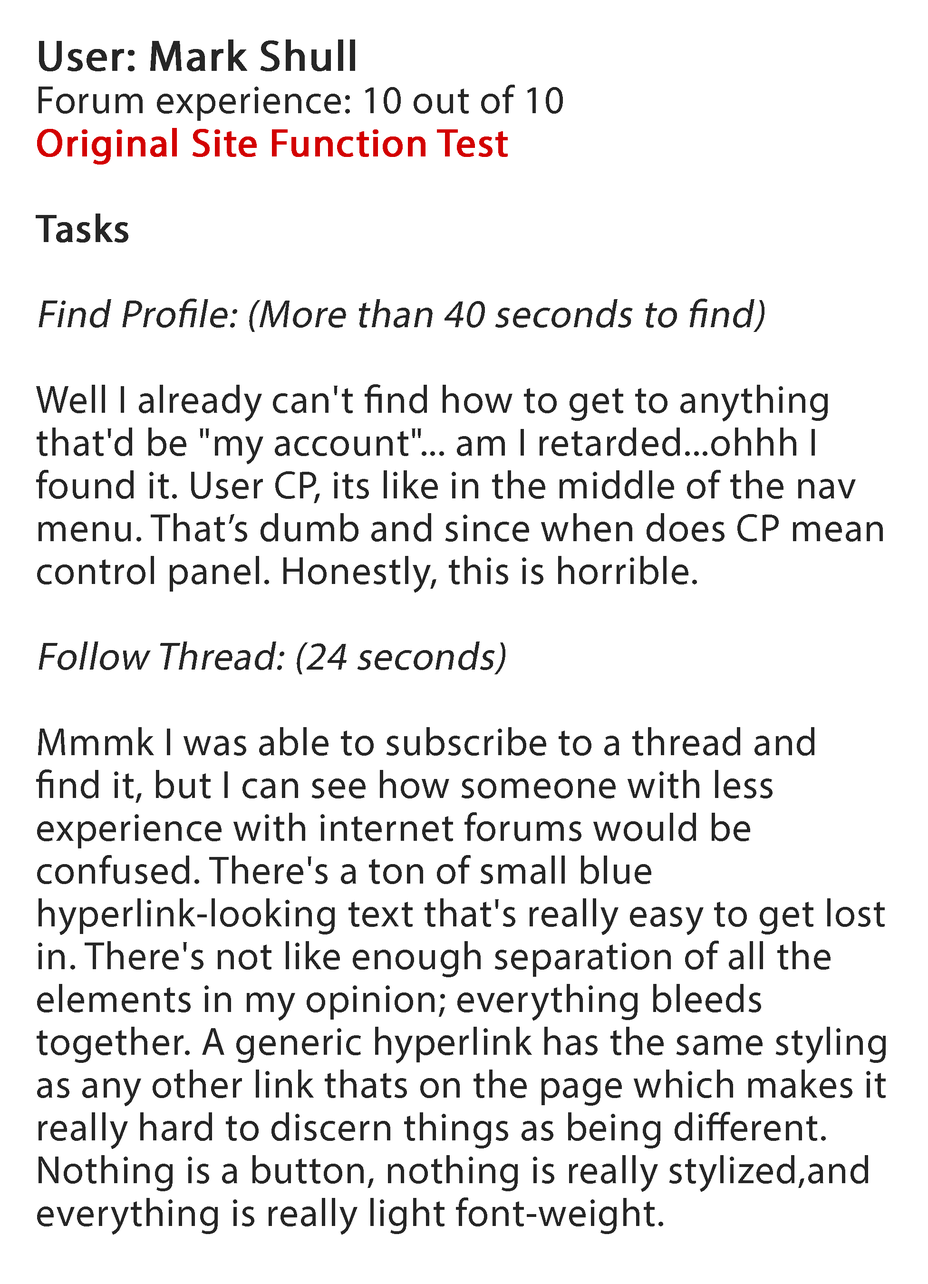
<style>
.page{position:relative;width:928px;height:1284px;background:#ffffff}
.page>*{position:absolute;margin:0}
.t1{font:39.2px "MyriadPro-Regular";letter-spacing:0.02em;color:#262626}
.t2{font:43.6px "MyriadPro-Regular";letter-spacing:0.02em;color:#262626;font-weight:bold}
.t3{font:39.2px "MyriadPro-Regular";letter-spacing:0.02em;color:#d30000;font-weight:bold}
.t4{font:39.2px "MyriadPro-Regular";letter-spacing:0.02em;color:#262626;font-weight:bold}
.t5{font:39.2px "MyriadPro-Regular";letter-spacing:0.02em;color:#262626;font-style:italic}
</style>
<div class="page">
<p class="t1" style="left:36px;top:39px;width:850px;height:1196px"><span class="t2">User: Mark Shull<br></span>Forum experience: 10 out of 10<br><span class="t3">Original Site Function Test<br><br></span><span class="t4">Tasks<br><br></span><span class="t5">Find Profile: (More than 40 seconds to find)<br><br></span>Well I already can't find how to get to anything that'd be "my account"... am I retarded...ohhh I found it. User CP, its like in the middle of the nav menu. That’s dumb and since when does CP mean control panel. Honestly, this is horrible. <br><br><span class="t5">Follow Thread: (24 seconds)<br><br></span>Mmmk I was able to subscribe to a thread and find it, but I can see how someone with less experience with internet forums would be confused. There's a ton of small blue hyperlink-looking text that's really easy to get lost in. There's not like enough separation of all the elements in my opinion; everything bleeds together. A generic hyperlink has the same styling as any other link thats on the page which makes it really hard to discern things as being different. Nothing is a button, nothing is really stylized,and everything is really light font-weight.</p>
</div>
